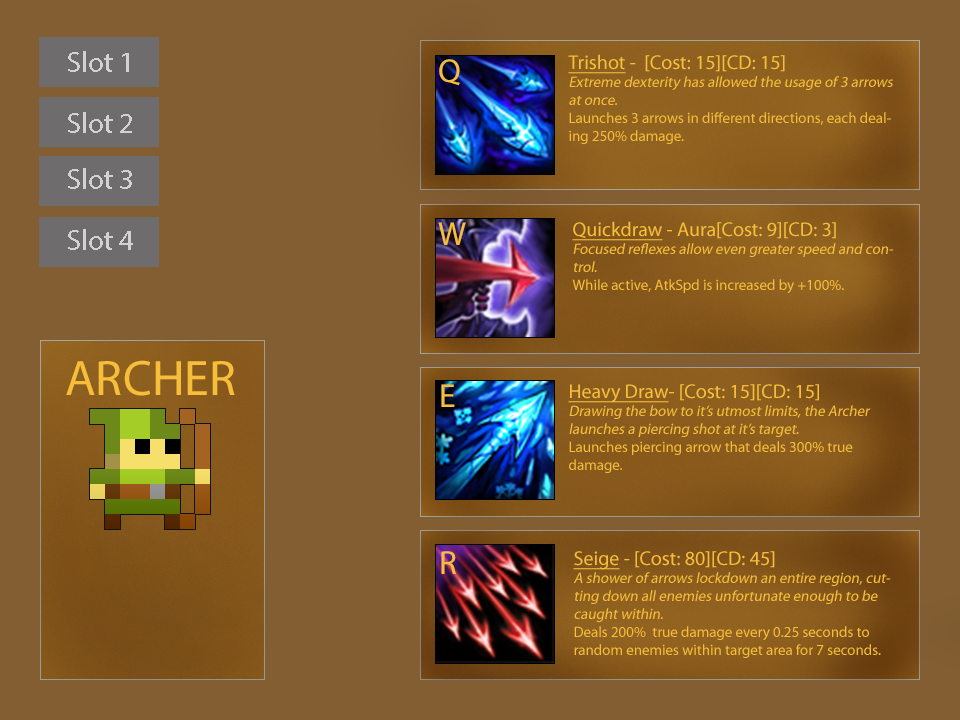
<style>
.page{position:relative;width:960px;height:720px;background:#835e33}
.page>*{position:absolute;margin:0}
.t1{font:29.2px "MyriadPro-Regular";color:#d2d2d2}
.t2{font:125px "MyriadPro-Regular";color:#ffffff}
.t3{font:15px "MyriadPro-Regular";color:#f6be3a}
.t4{font:20px "MyriadPro-Regular";color:#f6be3a;text-decoration:underline}
.t5{font:20px "MyriadPro-Regular";color:#f6be3a}
.t6{font:15px "MyriadPro-Regular";color:#f6be3a;font-style:italic}
.t7{font:33.2px "MyriadPro-Regular";color:#f6be3a}
.t8{font:50px "MyriadPro-Regular";color:#f6be3a}
</style>
<div class="page">
<p class="t1" style="left:68px;top:51px;width:61px;height:21px;text-align:center">Slot 1<br><span class="t2">hERO</span></p>
<p class="t3" style="left:568px;top:54px;width:325px;height:90px"><span class="t4">Trishot</span><span class="t5"> -  [Cost: 15][CD: 15]<br></span><span class="t6">Extreme dexterity has allowed the usage of 3 arrows at once.<br></span>Launches 3 arrows in different directions, each dealing 250% damage.</p>
<p class="t7" style="left:439px;top:59px;width:21px;height:27px">Q</p>
<p class="t1" style="left:68px;top:112px;width:64px;height:21px;text-align:center">Slot 2<br><span class="t2">hERO</span></p>
<p class="t1" style="left:68px;top:168px;width:64px;height:21px;text-align:center">Slot 3<br><span class="t2">hERO</span></p>
<p class="t7" style="left:438px;top:222px;width:28px;height:23px">W</p>
<p class="t6" style="left:572px;top:221px;width:322px;height:72px"><span class="t4">Quickdraw</span><span class="t5"> - Aura[Cost: 9][CD: 3]<br></span>Focused reflexes allow even greater speed and control.<br><span class="t3">While active, AtkSpd is increased by +100%.</span></p>
<p class="t1" style="left:68px;top:229px;width:65px;height:21px;text-align:center">Slot 4<br><span class="t2">hERO</span></p>
<p class="t8" style="left:66px;top:360px;width:169px;height:36px">ARCHER</p>
<p class="t7" style="left:441px;top:384px;width:14px;height:23px">E</p>
<p class="t6" style="left:568px;top:384px;width:303px;height:89px"><span class="t4">Heavy Draw</span><span class="t5">- [Cost: 15][CD: 15]<br></span>Drawing the bow to it’s utmost limits, the Archer launches a piercing shot at it’s target.<br><span class="t3">Launches piercing arrow that deals 300% true damage.</span></p>
<p class="t7" style="left:441px;top:551px;width:15px;height:23px">R</p>
<p class="t6" style="left:573px;top:551px;width:318px;height:107px"><span class="t4">Seige</span><span class="t5"> - [Cost: 80][CD: 45]<br></span>A shower of arrows lockdown an entire region, cutting down all enemies unfortunate enough to be caught within.<br><span class="t3">Deals 200%  true damage every 0.25 seconds to random enemies within target area for 7 seconds.</span></p>
</div>
